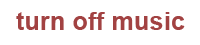
<style>
.page{position:relative;width:200px;height:45px;background:#ffffff}
.page>*{position:absolute;margin:0}
.t1{font:25px "Arial-BoldMT";color:#a24242}
</style>
<div class="page">
<p class="t1" style="left:16px;top:12px;width:169px;height:18px">turn off music</p>
</div>
